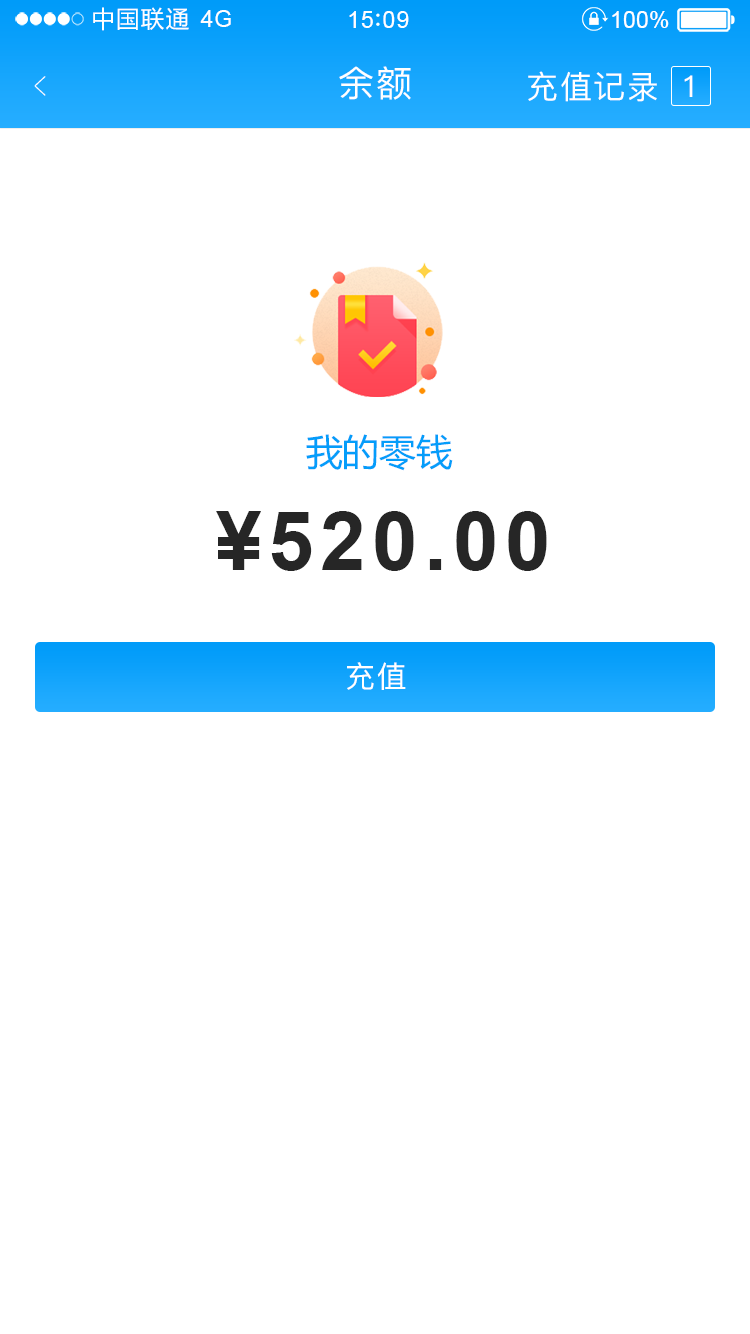
<style>
.page{position:relative;width:750px;height:1334px;background:#ffffff}
.page>*{position:absolute;margin:0}
.t1{font:23.4px "MicrosoftYaHei";letter-spacing:0.06em;color:#ffffff}
.t2{font:23.4px "ArialMT";letter-spacing:0.02em;color:#ffffff}
.t3{font:23.4px "ArialMT";letter-spacing:0.04em;color:#ffffff}
.t4{font:23.4px "ArialMT";color:#ffffff}
.t5{font:39px "PingFang-SC-ExtraLight";letter-spacing:0.1em;color:#ffffff;scale:0.51 1}
.t6{font:36px "PingFang-SC-Medium";letter-spacing:0.05em;color:#ffffff}
.t7{font:32px "PingFang-SC-Medium";letter-spacing:0.05em;color:#ffffff}
.t8{font:30px "PingFang-SC-Medium";letter-spacing:0.05em;color:#ffffff}
.t9{font:36.8px "MicrosoftYaHei";color:#049dfa}
.t10{font:81.9px "Arial-BoldMT";letter-spacing:0.08em;color:#262626}
</style>
<div class="page">
<p class="t1" style="left:93px;top:7px;width:96px;height:24px">中国联通</p>
<p class="t2" style="left:200px;top:10px;width:31px;height:17px">4G</p>
<p class="t3" style="left:349px;top:11px;width:60px;height:17px">15 09</p>
<p class="t4" style="left:612px;top:11px;width:57px;height:17px">100%</p>
<p class="t5" style="left:34px;top:76px;width:12px;height:20px;rotate:180deg">&gt;</p>
<p class="t6" style="left:339px;top:66px;width:72px;height:34px">余额</p>
<p class="t7" style="left:528px;top:71px;width:129px;height:31px">充值记录</p>
<p class="t8" style="left:684px;top:75px;width:9px;height:22px">1</p>
<p class="t9" style="left:306px;top:434px;width:147px;height:37px">我的零钱</p>
<p class="t10" style="left:216px;top:511px;width:331px;height:60px">¥520.00</p>
<p class="t8" style="left:347px;top:662px;width:59px;height:28px">充值</p>
</div>
